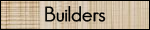
<style>
.page{position:relative;width:150px;height:30px}
.page>*{position:absolute;margin:0}
.t1{font:20px "GeosansLight";color:#000000;font-weight:bold}
</style>
<div class="page">
<p class="t1" style="left:45px;top:6px;width:61px;height:16px">Builders</p>
</div>
